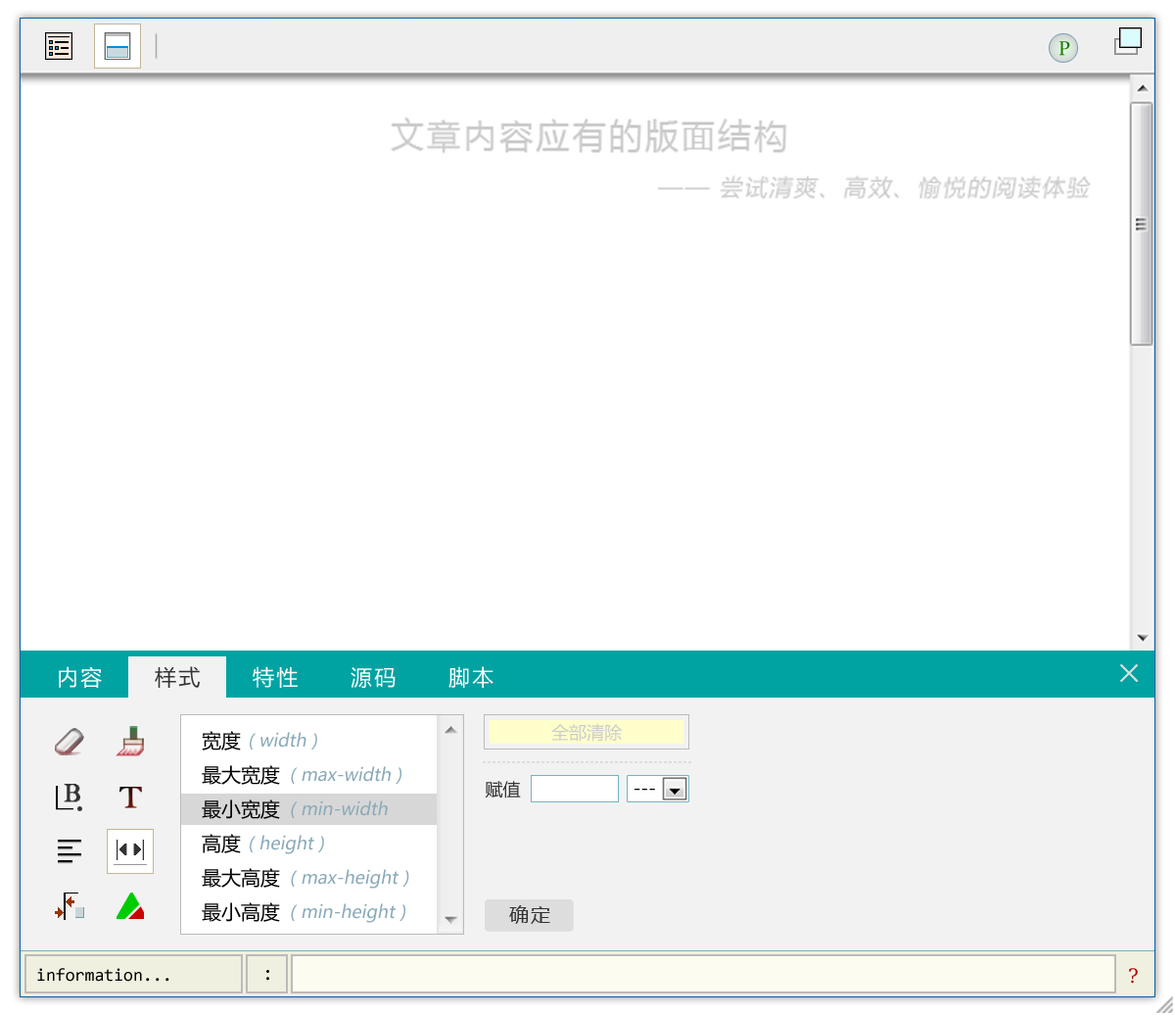
<style>
.page{position:relative;width:1175px;height:1015px;background:#ffffff}
.page>*{position:absolute;margin:0}
.t1{font:19.6px "Constantia";color:#1b7802}
.t2{font:21.5px "MicrosoftYaHei";letter-spacing:0.1em;color:#ffffff}
.t3{font:21.5px "MicrosoftYaHei";letter-spacing:0.1em;color:#333333}
.t4{font:27.4px "NSimSun";letter-spacing:0.1em;color:#dddddd;font-weight:bold}
.t5{font:17.6px "MicrosoftYaHei";color:#cccccc}
.t6{font:19.6px "MicrosoftYaHei";color:#000000}
.t7{font:17.6px/34.3px "MicrosoftYaHei";color:#8baab9;font-style:italic}
.t8{font:25.5px "MS Serif";letter-spacing:0.1em;color:#333333;font-weight:bold}
.t9{font:17.6px "MicrosoftYaHei";color:#333333}
.t10{font:17.6px "MicrosoftYaHei";color:#000000}
.t11{font:19.6px "MicrosoftYaHei";letter-spacing:0.1em;color:#333333}
.t12{font:17.6px "Consolas";color:#000000}
.t13{font:19.6px "Consolas";color:#000000}
.t14{font:19.6px "DejaVuSerif";color:#aa0000}
</style>
<div class="page">
<p class="t1" style="left:1060px;top:41px;width:10px;height:15px">P</p>
<p class="t2" style="left:59px;top:666px;width:43px;height:22px">内容</p>
<p class="t3" style="left:155px;top:666px;width:45px;height:22px">样式</p>
<p class="t2" style="left:253px;top:666px;width:45px;height:22px">特性</p>
<p class="t2" style="left:449px;top:666px;width:45px;height:22px">脚本</p>
<p class="t4" style="left:1120px;top:664px;width:19px;height:18px">×</p>
<p class="t2" style="left:351px;top:667px;width:45px;height:21px">源码</p>
<p class="t5" style="left:551px;top:723px;width:71px;height:18px">全部清除</p>
<p class="t6" style="left:202px;top:731px;width:78px;height:191px">宽度<br>最大宽度<br>最小宽度<br>高度<br>最大高度<br>最小高度</p>
<p class="t7" style="left:250px;top:732px;width:159px;height:191px">( width )<br>        ( max-width )<br>        ( min-width<br>( height )<br>        ( max-height )<br>        ( min-height )</p>
<p class="t8" style="left:64px;top:783px;width:16px;height:19px">B</p>
<p class="t9" style="left:485px;top:781px;width:36px;height:17px">赋值</p>
<p class="t10" style="left:635px;top:788px;width:20px;height:2px">---</p>
<p class="t11" style="left:509px;top:905px;width:41px;height:19px">确定</p>
<p class="t12" style="left:37px;top:968px;width:132px;height:13px">information...</p>
<p class="t13" style="left:266px;top:970px;width:3px;height:10px">:</p>
<p class="t14" style="left:1129px;top:968px;width:9px;height:15px">?</p>
</div>
